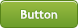
<style>
.page{position:relative;width:78px;height:28px}
.page>*{position:absolute;margin:0}
.t1{font:12px "TrebuchetMS-Bold";color:#ffffff}
</style>
<div class="page">
<p class="t1" style="left:21px;top:10px;width:37px;height:9px">Button</p>
</div>
